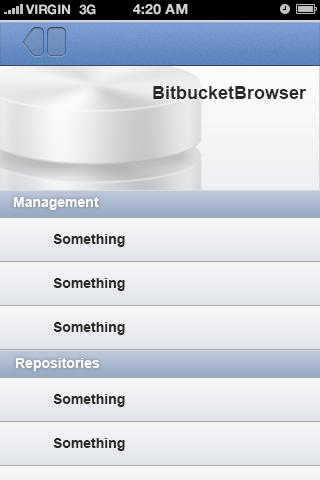
<style>
.page{position:relative;width:320px;height:480px}
.page>*{position:absolute;margin:0}
.t1{font:13px "HelveticaNeue-Bold";color:#d4d4d4;text-transform:uppercase}
.t2{font:14px "HelveticaNeue-Bold";color:#d4d4d4;text-transform:uppercase}
.t3{font:18px "Arial-BoldMT";color:#292929}
.t4{font:14px "Arial-BoldMT";color:#ffffff}
</style>
<div class="page">
<p class="t1" style="left:26px;top:4px;width:44px;height:11px">VIRGIN</p>
<p class="t1" style="left:79px;top:4px;width:17px;height:11px">3G</p>
<p class="t2" style="left:133px;top:4px;width:55px;height:11px">4:20 AM</p>
<p class="t3" style="left:153px;top:86px;width:153px;height:13px">BitbucketBrowser</p>
<p class="t4" style="left:13px;top:197px;width:86px;height:13px">Management</p>
<p class="t4" style="left:15px;top:358px;width:85px;height:13px">Repositories</p>
</div>
